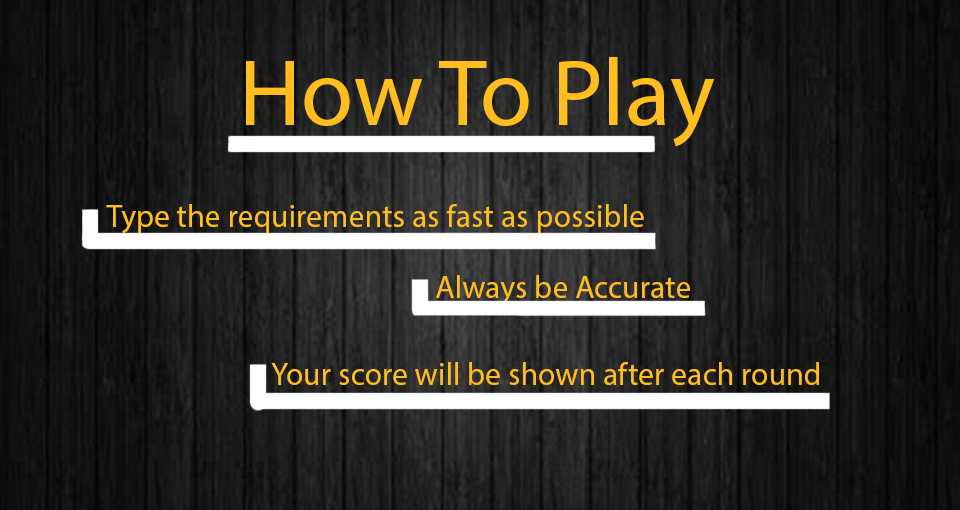
<style>
.page{position:relative;width:960px;height:510px}
.page>*{position:absolute;margin:0}
.t1{font:95.2px "MyriadPro-Regular";color:#ffbd1e}
.t2{font:31.8px "MyriadPro-Regular";color:#ffbd1e}
</style>
<div class="page">
<p class="t1" style="left:246px;top:57px;width:469px;height:90px">How To Play</p>
<p class="t2" style="left:106px;top:204px;width:538px;height:30px">Type the requirements as fast as possible</p>
<p class="t2" style="left:436px;top:275px;width:254px;height:30px">Always be Accurate</p>
<p class="t2" style="left:271px;top:362px;width:548px;height:23px">Your score will be shown after each round</p>
</div>
